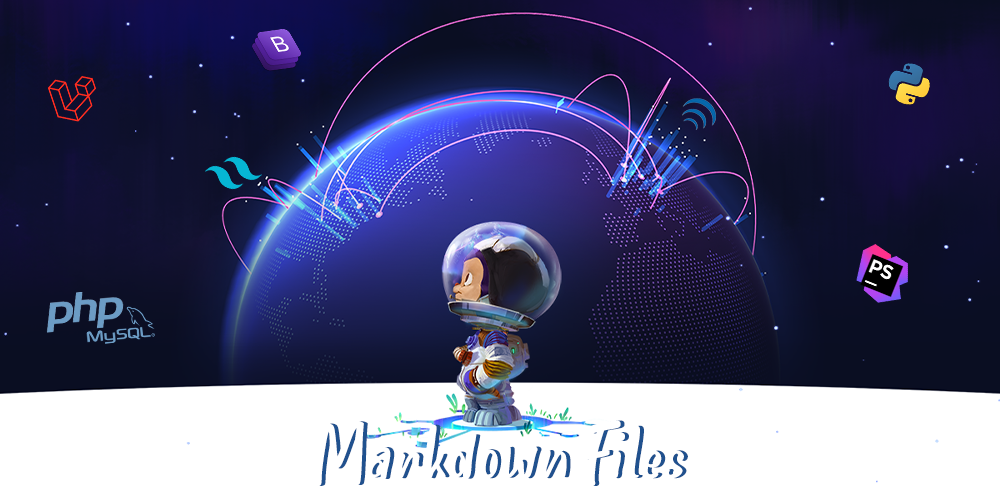
<style>
.page{position:relative;width:1000px;height:500px;background:#ffffff}
.page>*{position:absolute;margin:0}
.t1{font:66.7px "HelloTeman"}
</style>
<div class="page">
<p class="t1" style="left:316px;top:420px;width:372px;height:66px">Markdown Files</p>
</div>
